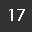
<style>
.page{position:relative;width:32px;height:32px;background:#333333}
.page>*{position:absolute;margin:0}
.t1{font:17.8px "MyriadPro-Regular";color:#ffffff;scale:1.12 1}
</style>
<div class="page">
<p class="t1" style="left:9px;top:9px;width:16px;height:12px">17</p>
</div>
